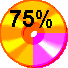
<style>
.page{position:relative;width:68px;height:68px;background:#ffffff}
.page>*{position:absolute;margin:0}
.t1{font:24px "Arial-BoldMT";color:#000002}
</style>
<div class="page">
<p class="t1" style="left:10px;top:10px;width:42px;height:18px">75%</p>
</div>
